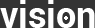
<style>
.page{position:relative;width:95px;height:28px;background:#333333}
.page>*{position:absolute;margin:0}
.t1{font:36px "Roboto-Bold";color:#ffffff}
</style>
<div class="page">
<p class="t1" style="left:0px;top:0px;width:95px;height:28px">vision</p>
</div>
